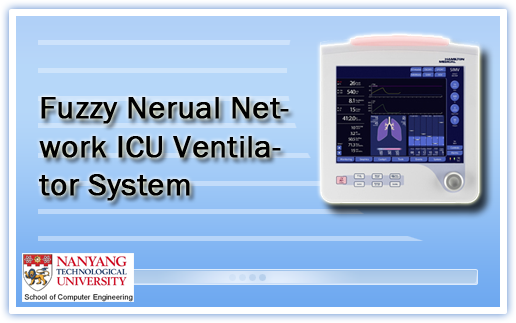
<style>
.page{position:relative;width:516px;height:323px}
.page>*{position:absolute;margin:0}
.t1{font:32px "FranklinGothic-Book";color:#010101;font-weight:bold}
</style>
<div class="page">
<p class="t1" style="left:39px;top:97px;width:250px;height:104px">Fuzzy Nerual Network ICU Ventilator System</p>
</div>
